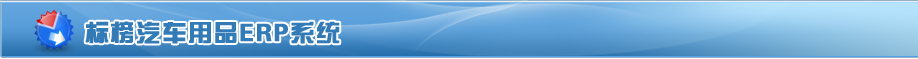
<style>
.page{position:relative;width:918px;height:59px}
.page>*{position:absolute;margin:0}
.t1{font:24px "FZZYJW--GB1-0";letter-spacing:0.05em;color:#337bb7;font-weight:bold}
</style>
<div class="page">
<p class="t1" style="left:85px;top:21px;width:255px;height:23px">标榜汽车用品ERP系统</p>
</div>
